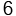
<style>
.page{position:relative;width:16px;height:16px;background:#ffffff}
.page>*{position:absolute;margin:0}
.t1{font:20px "DengXian";color:#000000}
</style>
<div class="page">
<p class="t1" style="left:3px;top:1px;width:10px;height:14px">6</p>
</div>
